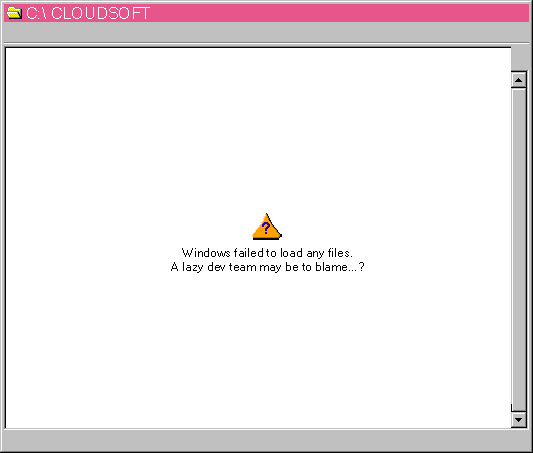
<style>
.page{position:relative;width:533px;height:453px;background:#ffffff}
.page>*{position:absolute;margin:0}
.t1{font:16.3px "MicrosoftSansSerif";color:#ffffff}
.t2{font:12px "MicrosoftSansSerif";color:#040404}
</style>
<div class="page">
<p class="t1" style="left:27px;top:7px;width:123px;height:12px">C:\ CLOUDSOFT</p>
<p class="t2" style="left:171px;top:248px;width:193px;height:25px;text-align:center">Windows failed to load any files.<br>A lazy dev team may be to blame...?</p>
</div>
